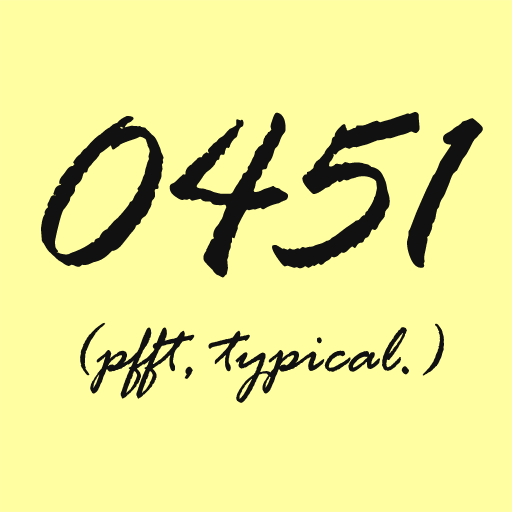
<style>
.page{position:relative;width:512px;height:512px;background:#fffea0}
.page>*{position:absolute;margin:0}
.t1{font:256px "RageItalic";color:#111111}
.t2{font:72px "RageItalic";color:#111111}
</style>
<div class="page">
<p class="t1" style="left:41px;top:112px;width:442px;height:166px">0451</p>
<p class="t2" style="left:80px;top:322px;width:364px;height:81px">(pfft, typical.)</p>
</div>
